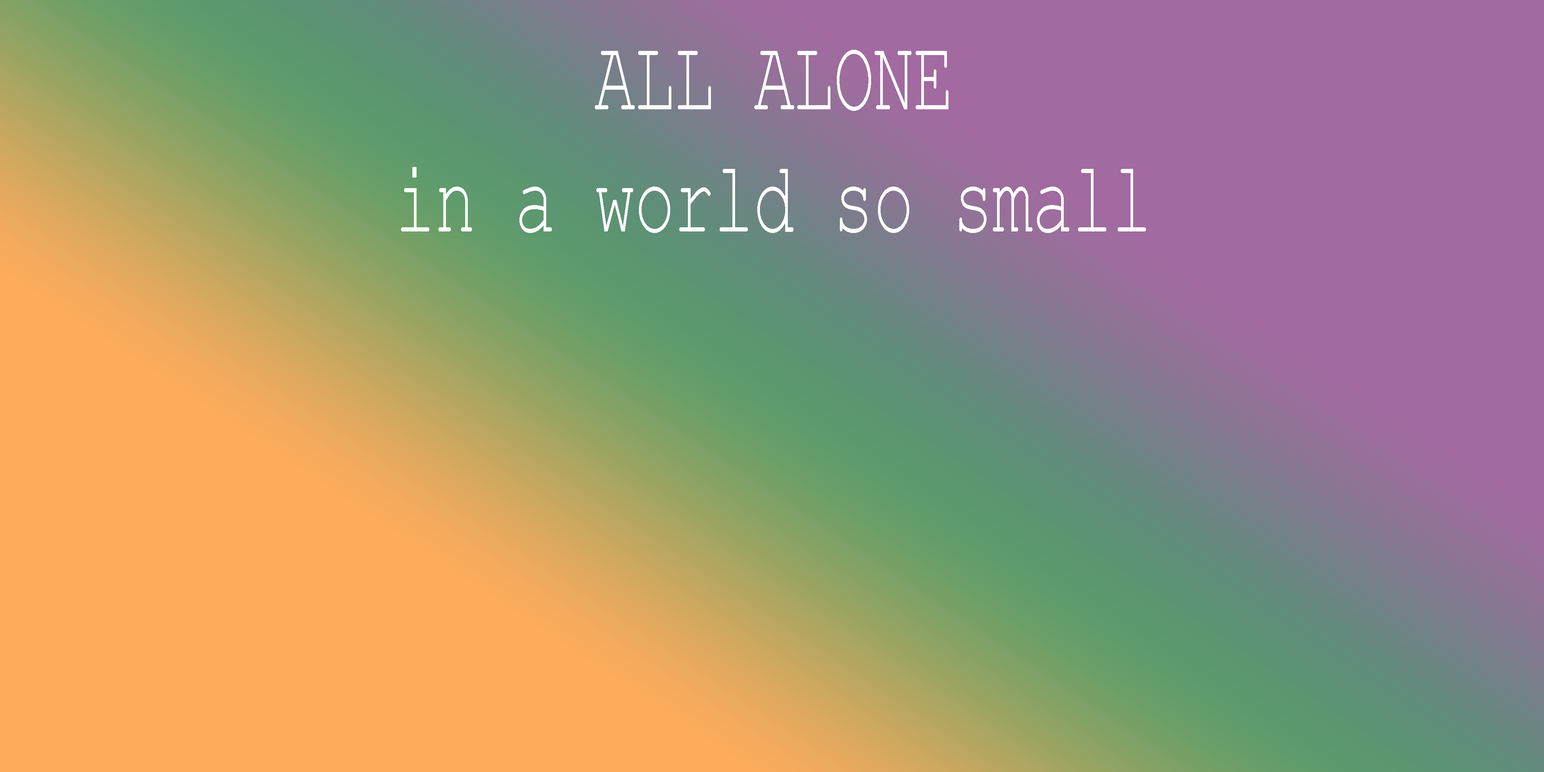
<style>
.page{position:relative;width:1544px;height:772px}
.page>*{position:absolute;margin:0}
.t1{font:101.8px "CourierNewPSMT";color:#ffffff;scale:0.67 1}
</style>
<div class="page">
<p class="t1" style="left:401px;top:50px;width:745px;height:183px;text-align:center">ALL ALONE<br>in a world so small</p>
</div>
